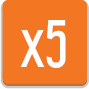
<style>
.page{position:relative;width:89px;height:89px;background:#f37622}
.page>*{position:absolute;margin:0}
.t1{font:60px "LibelSuitRg-Regular";color:#ffffff}
</style>
<div class="page">
<p class="t1" style="left:20px;top:20px;width:46px;height:48px">x5</p>
</div>
